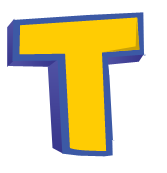
<style>
.page{position:relative;width:167px;height:173px;background:#ffffff}
.page>*{position:absolute;margin:0}
.t1{font:150px "PokemonSolidNormal";color:#ffcc03}
</style>
<div class="page">
<p class="t1" style="left:19px;top:17px;width:121px;height:134px">T</p>
</div>
